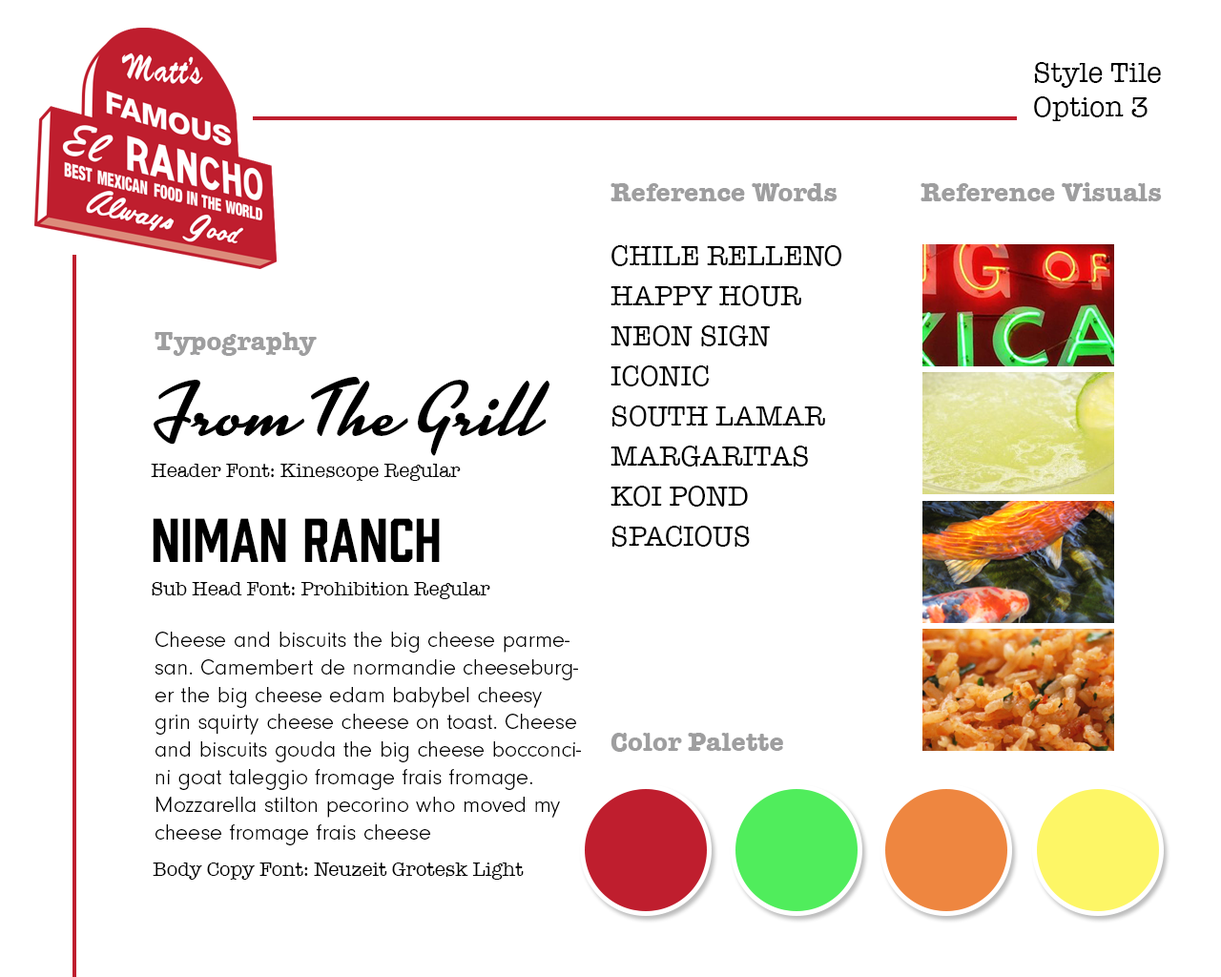
<style>
.page{position:relative;width:1221px;height:977px;background:#ffffff}
.page>*{position:absolute;margin:0}
.t1{font:28.6px "AmericanTypewriter";color:#000000}
.t2{font:26.7px "AmericanTypewriter-Bold";color:#9e9e9f}
.t3{font:28.6px/40.1px "AmericanTypewriter";color:#000000}
.t4{font:76.3px "Kinescope";color:#000000}
.t5{font:20px "AmericanTypewriter";color:#000000}
.t6{font:57.2px "Prohibition-Regular";color:#000000}
.t7{font:22.9px "NeuzeitGro-Lig";letter-spacing:0.005em;color:#000000}
</style>
<div class="page">
<p class="t1" style="left:1034px;top:62px;width:127px;height:59px">Style Tile<br>Option 3</p>
<p class="t2" style="left:610px;top:183px;width:227px;height:18px">Reference Words</p>
<p class="t2" style="left:920px;top:182px;width:242px;height:19px">Reference Visuals</p>
<p class="t3" style="left:610px;top:245px;width:231px;height:302px">CHILE RELLENO<br>HAPPY HOUR<br>NEON SIGN<br>ICONIC<br>SOUTH LAMAR<br>MARGARITAS<br>KOI POND<br>SPACIOUS</p>
<p class="t2" style="left:155px;top:332px;width:162px;height:24px">Typography</p>
<p class="t4" style="left:154px;top:377px;width:395px;height:79px">From The Grill</p>
<p class="t5" style="left:151px;top:464px;width:310px;height:17px">Header Font: Kinescope Regular</p>
<p class="t6" style="left:153px;top:518px;width:287px;height:44px">Niman Ranch</p>
<p class="t5" style="left:152px;top:582px;width:338px;height:17px">Sub Head Font: Prohibition Regular</p>
<p class="t7" style="left:155px;top:631px;width:426px;height:214px">Cheese and biscuits the big cheese parmesan. Camembert de normandie cheeseburger the big cheese edam babybel cheesy grin squirty cheese cheese on toast. Cheese and biscuits gouda the big cheese bocconcini goat taleggio fromage frais fromage. Mozzarella stilton pecorino who moved my cheese fromage frais cheese<br>and wine rubber cheese fromage. Cheeseburger cow<br>who moved my cheese the big cheese.</p>
<p class="t2" style="left:610px;top:733px;width:173px;height:19px">Color Palette</p>
<p class="t5" style="left:153px;top:862px;width:371px;height:17px">Body Copy Font: Neuzeit Grotesk Light</p>
</div>
